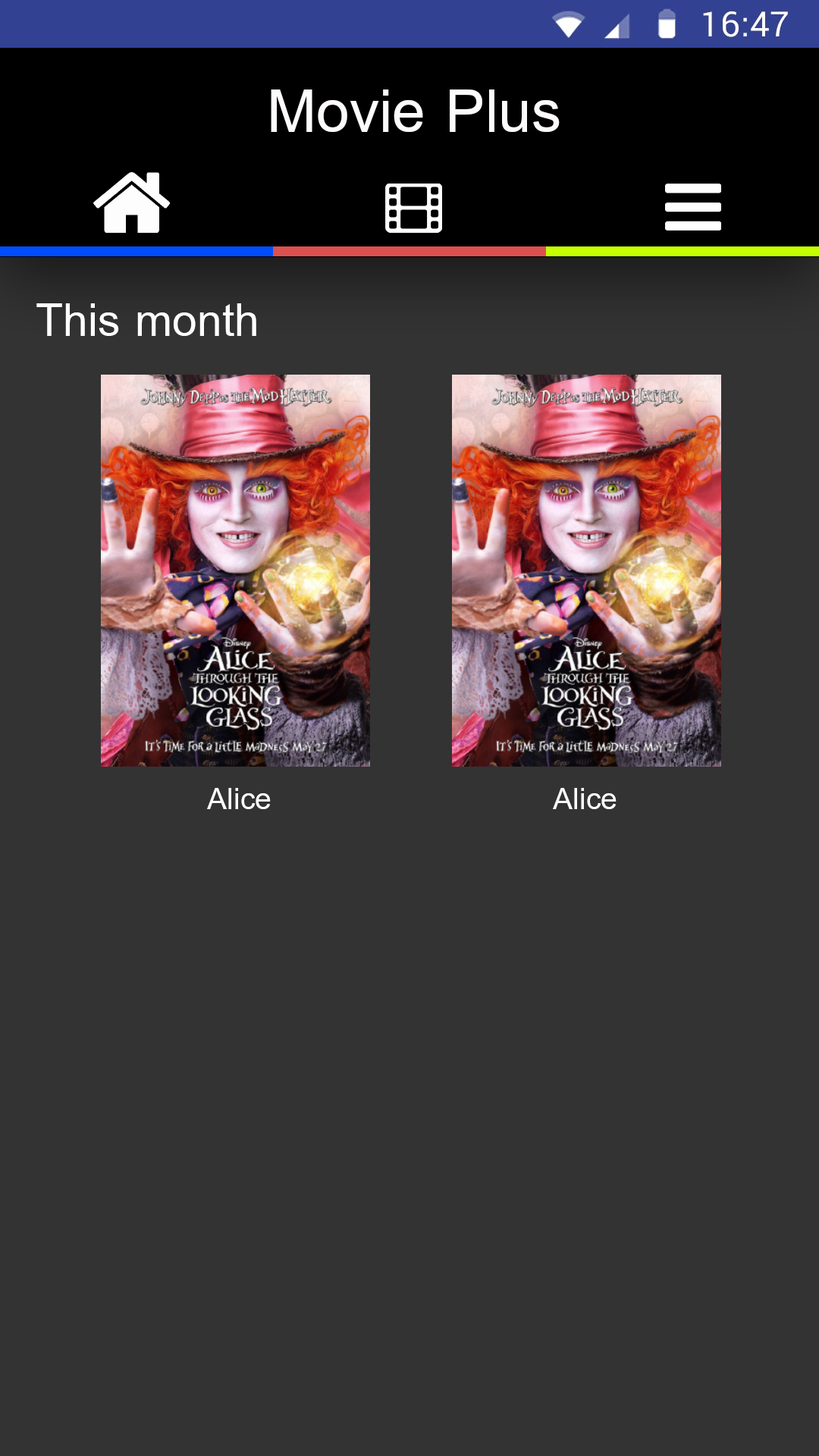
<style>
.page{position:relative;width:819px;height:1456px;background:#333333}
.page>*{position:absolute;margin:0}
.t1{font:91px "BrowalliaNew";color:#fefbfb}
.t2{font:68.2px "BrowalliaNew";color:#ffffff}
.t3{font:45.5px "BrowalliaNew";color:#fefbfb}
</style>
<div class="page">
<p class="t1" style="left:271px;top:89px;width:289px;height:43px">Movie Plus</p>
<p class="t2" style="left:36px;top:303px;width:220px;height:33px">This month</p>
<p class="t3" style="left:207px;top:788px;width:64px;height:21px">Alice</p>
<p class="t3" style="left:553px;top:788px;width:64px;height:21px">Alice</p>
</div>
